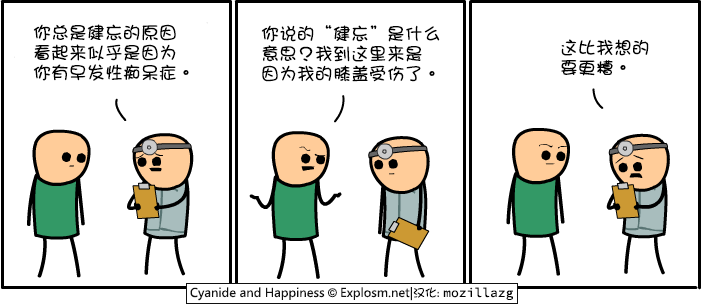
<style>
.page{position:relative;width:701px;height:305px;background:#ffffff}
.page>*{position:absolute;margin:0}
.t1{font:18px/20px "DFGirl";color:#000000}
</style>
<div class="page">
<p class="t1" style="left:33px;top:24px;width:156px;height:57px">你总是健忘的原因<br>看起来似乎是因为<br>你有早发性痴呆症。</p>
<p class="t1" style="left:261px;top:25px;width:179px;height:57px">你说的“健忘”是什么<br>意思？我到这里来是<br>因为我的膝盖受伤了。</p>
<p class="t1" style="left:561px;top:39px;width:88px;height:37px">这比我想的<br>要更糟。</p>
</div>
